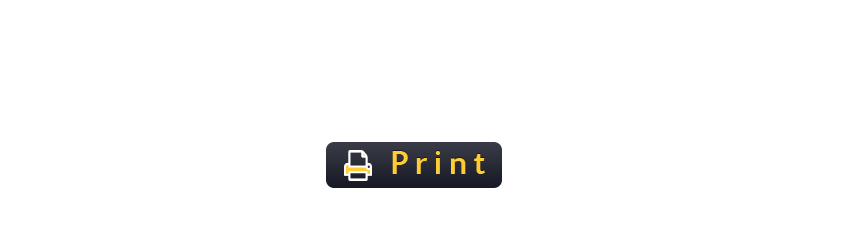
<style>
.page{position:relative;width:850px;height:250px;background:#ffffff}
.page>*{position:absolute;margin:0}
.t1{font:30px "EuphemiaUCAS-Bold";letter-spacing:0.2em;color:#ffcc33}
</style>
<div class="page">
<p class="t1" style="left:392px;top:151px;width:93px;height:23px">Print</p>
</div>
